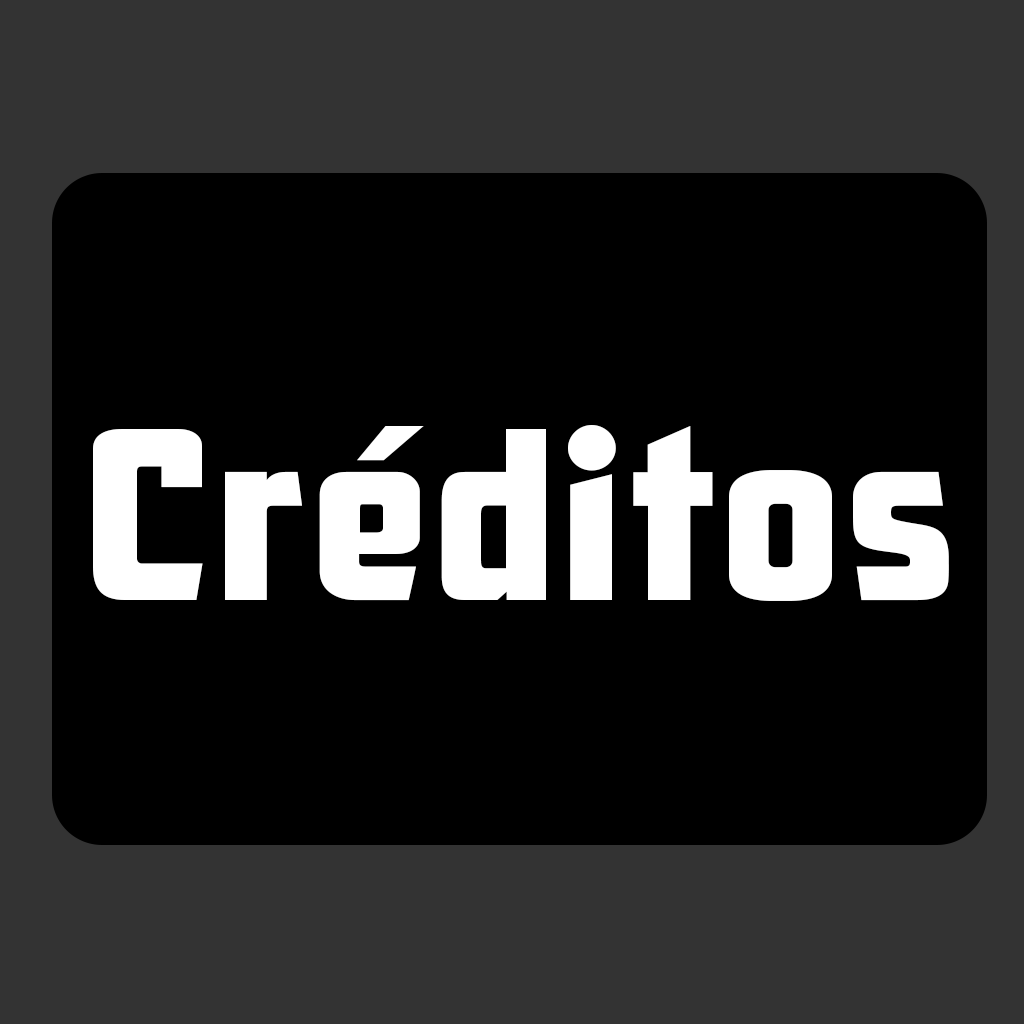
<style>
.page{position:relative;width:1024px;height:1024px;background:#000000}
.page>*{position:absolute;margin:0}
.t1{font:235.1px "AmericanCaptainPatrius";color:#ffffff}
</style>
<div class="page">
<p class="t1" style="left:93px;top:425px;width:856px;height:176px">Créditos</p>
</div>
